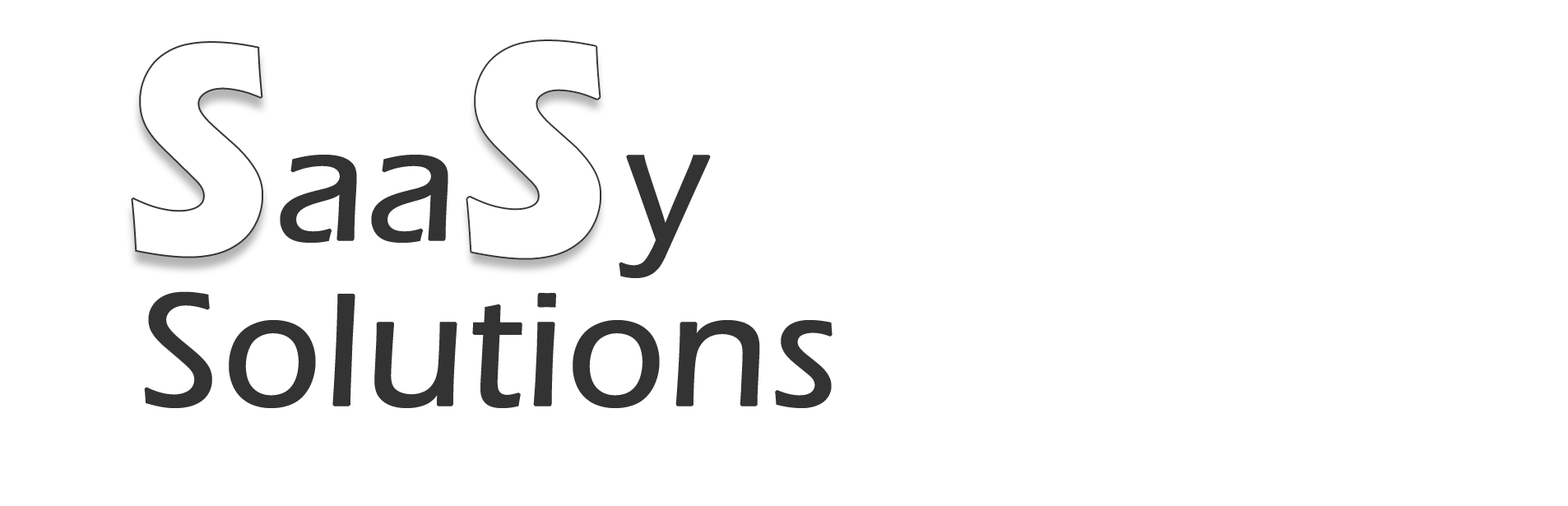
<style>
.page{position:relative;width:1568px;height:506px;background:#ffffff}
.page>*{position:absolute;margin:0}
.t1{font:308.5px "ErasITC-Bold";color:#ffffff;font-weight:bold;scale:0.88 1}
.t2{font:164.5px "ErasITC-Medium";color:#333333;font-weight:bold}
</style>
<div class="page">
<p class="t1" style="left:467px;top:41px;width:133px;height:217px;rotate:-1deg;opacity:0.97">S</p>
<p class="t2" style="left:280px;top:155px;width:168px;height:88px">aa</p>
<p class="t2" style="left:619px;top:155px;width:92px;height:123px">y</p>
<p class="t2" style="left:144px;top:291px;width:689px;height:117px">Solutions</p>
</div>
